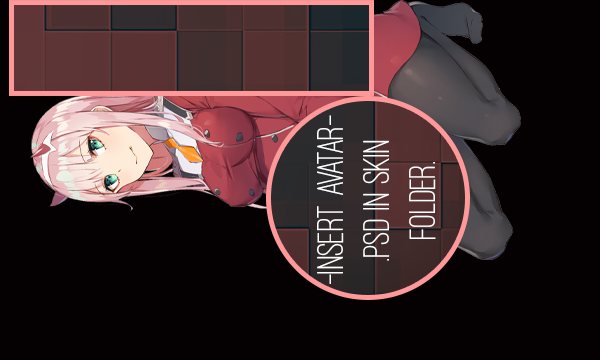
<style>
.page{position:relative;width:600px;height:360px;background:#050103}
.page>*{position:absolute;margin:0}
.t1{font:38.1px "OstrichSans-Medium";color:#ffffff}
</style>
<div class="page">
<p class="t1" style="left:317px;top:115px;width:119px;height:169px;text-align:center;rotate:-90deg">-Insert avatar-<br>.psd in skin<br>folder.</p>
</div>
